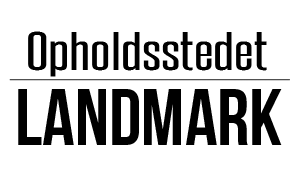
<style>
.page{position:relative;width:300px;height:180px;background:#ffffff}
.page>*{position:absolute;margin:0}
.t1{font:45.6px "SteelfishRg-Regular";color:#000000;scale:1.54 1}
.t2{font:80px "BebasNeue";color:#000000}
</style>
<div class="page">
<p class="t1" style="left:28px;top:31px;width:239px;height:46px">Opholdsstedet</p>
<p class="t2" style="left:18px;top:89px;width:264px;height:56px">Landmark</p>
</div>
